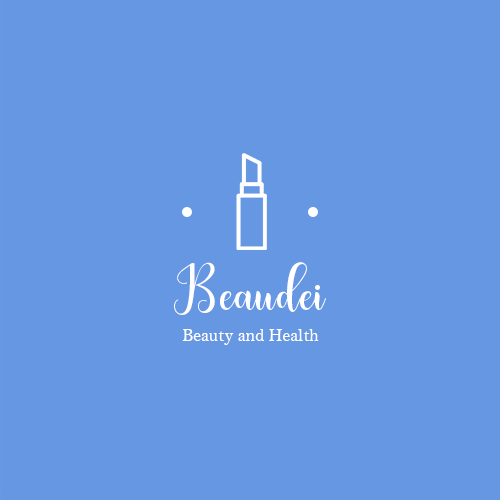
<style>
.page{position:relative;width:500px;height:500px;background:#6697e3}
.page>*{position:absolute;margin:0}
.t1{font:72px "bertilda";color:#ffffff}
.t2{font:18px "BellMT";color:#ffffff}
</style>
<div class="page">
<p class="t1" style="left:174px;top:262px;width:152px;height:53px">Beaudei</p>
<p class="t2" style="left:182px;top:329px;width:137px;height:16px">Beauty and Health</p>
</div>
